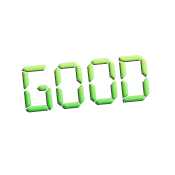
<style>
.page{position:relative;width:175px;height:175px;background:#ffffff}
.page>*{position:absolute;margin:0}
.t1{font:69px "Digital-7"}
</style>
<div class="page">
<p class="t1" style="left:23px;top:54px;width:127px;height:58px;rotate:-6deg">GOOD</p>
</div>
